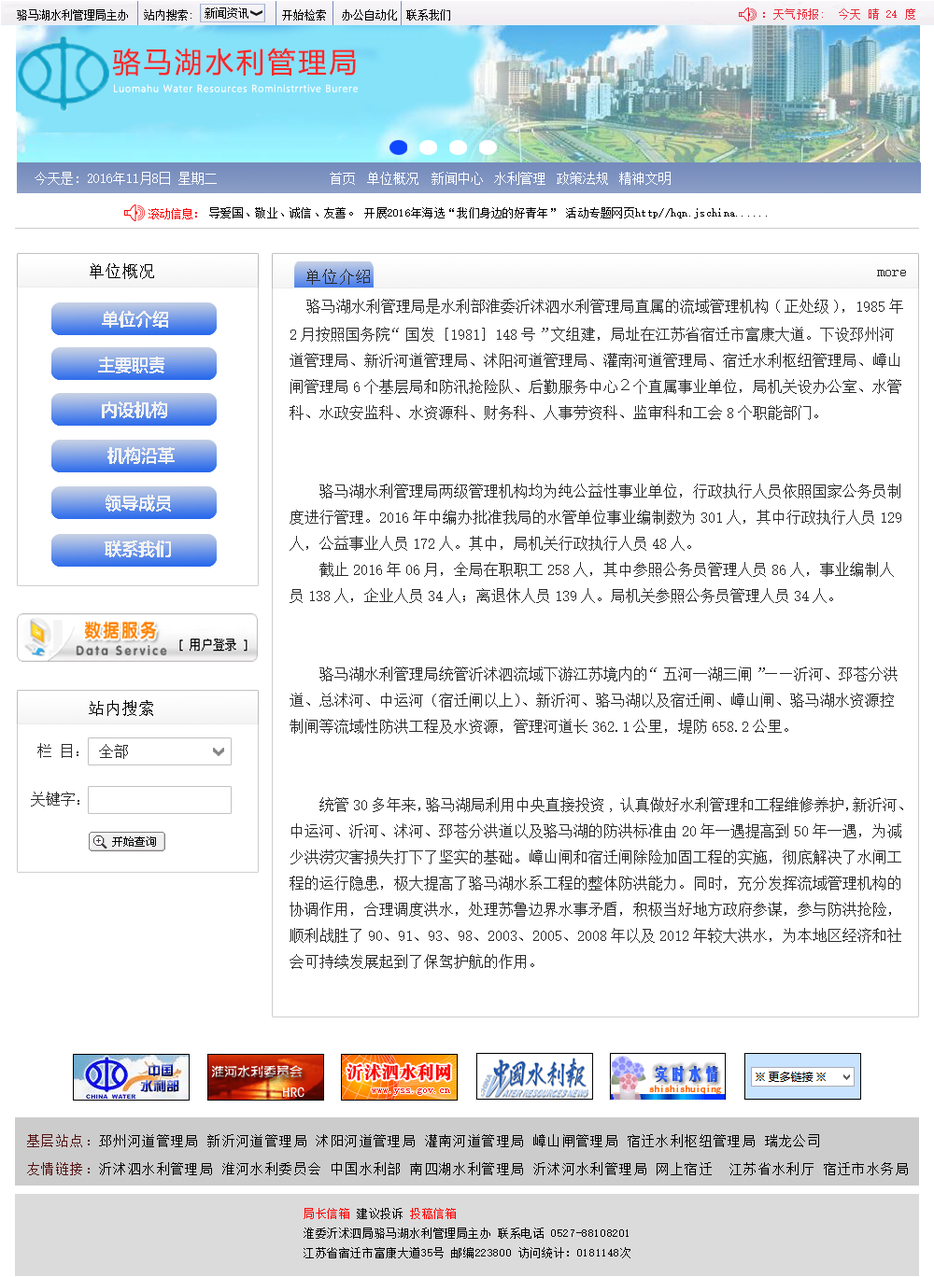
<style>
.page{position:relative;width:934px;height:1277px;background:#ffffff}
.page>*{position:absolute;margin:0}
.t1{font:11.2px "SimSun";color:#000000}
.t2{font:11.2px "SimSun";color:#010101}
.t3{font:11.2px "SimSun";letter-spacing:0.05em;color:#e92b3a}
.t4{font:28px "MicrosoftYaHei";letter-spacing:0.1em;color:#f12020}
.t5{font:9.3px "MicrosoftYaHeiLight";letter-spacing:0.07em;color:#ffffff;font-weight:bold}
.t6{font:13.1px "SimSun";color:#ffffff}
.t7{font:11.2px "SimSun";color:#ff0000}
.t8{font:11.2px "SimSun";letter-spacing:0.025em;color:#010101}
.t9{font:16.8px "SimSun";color:#000000}
.t10{font:16.8px "SimSun";color:#2b2a2a}
.t11{font:14.9px "SimSun";color:#2b2a2a}
.t12{font:16.8px "MicrosoftYaHei-Bold";color:#f2f2f2}
.t13{font:13.1px/28px "SimSun";letter-spacing:0.1em;color:#000000}
.t14{font:13.1px/28px "SimSun";letter-spacing:0.1em;color:#531111}
.t15{font:11.2px "SimSun";letter-spacing:0.05em;color:#000000}
.t16{font:11.2px "SimSun";letter-spacing:0.05em;color:#ff0000}
.t17{font:11.2px/28px "SimSun";letter-spacing:-0.1em;color:#000000}
</style>
<div class="page">
<p class="t1" style="left:17px;top:9px;width:111px;height:12px">骆马湖水利管理局主办</p>
<p class="t1" style="left:144px;top:9px;width:47px;height:12px">站内搜索:</p>
<p class="t1" style="left:204px;top:7px;width:44px;height:12px">新闻资讯</p>
<p class="t2" style="left:282px;top:9px;width:44px;height:12px">开始检索</p>
<p class="t1" style="left:342px;top:9px;width:55px;height:12px">办公自动化</p>
<p class="t1" style="left:406px;top:9px;width:44px;height:12px">联系我们</p>
<p class="t3" style="left:763px;top:8px;width:152px;height:12px">：天气预报:  今天 晴 24 度</p>
<p class="t4" style="left:112px;top:48px;width:244px;height:29px">骆马湖水利管理局</p>
<p class="t5" style="left:114px;top:84px;width:244px;height:8px">Luomahu Water Resources Roministrrtive Burere</p>
<p class="t6" style="left:35px;top:172px;width:182px;height:13px">今天是: 2016年11月8日 星期二</p>
<p class="t6" style="left:330px;top:172px;width:25px;height:13px">首页</p>
<p class="t6" style="left:367px;top:172px;width:51px;height:13px">单位概况</p>
<p class="t6" style="left:431px;top:172px;width:52px;height:13px">新闻中心</p>
<p class="t6" style="left:494px;top:172px;width:51px;height:13px">水利管理</p>
<p class="t6" style="left:556px;top:172px;width:52px;height:13px">政策法规</p>
<p class="t6" style="left:619px;top:172px;width:51px;height:13px">精神文明</p>
<p class="t7" style="left:148px;top:208px;width:49px;height:11px">滚动信息：</p>
<p class="t8" style="left:209px;top:207px;width:558px;height:11px">导爱国、敬业、诚信、友善。 开展2016年海选“我们身边的好青年” 活动专题网页http//hqn.jschina......</p>
<p class="t9" style="left:90px;top:263px;width:64px;height:16px">单位概况</p>
<p class="t10" style="left:306px;top:269px;width:64px;height:16px">单位介绍</p>
<p class="t11" style="left:877px;top:270px;width:29px;height:6px">more</p>
<p class="t11" style="left:289px;top:299px;width:614px;height:670px"><span class="t10">　</span>骆马湖水利管理局是水利部淮委沂沭泗水利管理局直属的流域管理机构(正处级)，1985年2月按照国务院“国发［1981］148号”文组建，局址在江苏省宿迁市富康大道。下设邳州河道管理局、新沂河道管理局、沭阳河道管理局、灌南河道管理局、宿迁水利枢纽管理局、嶂山闸管理局6个基层局和防汛抢险队、后勤服务中心２个直属事业单位，局机关设办公室、水管科、水政安监科、水资源科、财务科、人事劳资科、监审科和工会8个职能部门。<br><br><br>　　骆马湖水利管理局两级管理机构均为纯公益性事业单位，行政执行人员依照国家公务员制度进行管理。2016年中编办批准我局的水管单位事业编制数为301人，其中行政执行人员129人，公益事业人员172人。其中，局机关行政执行人员48人。 <br>　　截止2016年06月，全局在职职工258人，其中参照公务员管理人员86人，事业编制人员138人，企业人员34人；离退休人员139人。局机关参照公务员管理人员34人。<br>  <br><br>　　骆马湖水利管理局统管沂沭泗流域下游江苏境内的“五河一湖三闸”——沂河、邳苍分洪道、总沭河、中运河（宿迁闸以上）、新沂河、骆马湖以及宿迁闸、嶂山闸、骆马湖水资源控制闸等流域性防洪工程及水资源，管理河道长362.1公里，堤防658.2公里。<br><br><br>    统管30多年来，骆马湖局利用中央直接投资,认真做好水利管理和工程维修养护，新沂河、中运河、沂河、沭河、邳苍分洪道以及骆马湖的防洪标准由20年一遇提高到50年一遇，为减少洪涝灾害损失打下了坚实的基础。嶂山闸和宿迁闸除险加固工程的实施，彻底解决了水闸工程的运行隐患，极大提高了骆马湖水系工程的整体防洪能力。同时，充分发挥流域管理机构的协调作用，合理调度洪水，处理苏鲁边界水事矛盾，积极当好地方政府参谋，参与防洪抢险，顺利战胜了90、91、93、98、2003、2005、2008年以及2012年较大洪水，为本地区经济和社会可持续发展起到了保驾护航的作用。</p>
<p class="t12" style="left:102px;top:311px;width:66px;height:17px">单位介绍</p>
<p class="t12" style="left:98px;top:357px;width:66px;height:16px">主要职责</p>
<p class="t12" style="left:102px;top:401px;width:65px;height:17px">内设机构</p>
<p class="t12" style="left:107px;top:447px;width:68px;height:17px">机构沿革</p>
<p class="t12" style="left:105px;top:495px;width:66px;height:17px">领导成员</p>
<p class="t12" style="left:105px;top:541px;width:66px;height:16px">联系我们</p>
<p class="t9" style="left:89px;top:700px;width:64px;height:16px">站内搜索</p>
<p class="t11" style="left:37px;top:743px;width:41px;height:15px">栏 目：</p>
<p class="t11" style="left:99px;top:744px;width:29px;height:15px">全部</p>
<p class="t11" style="left:31px;top:792px;width:48px;height:15px">关键字：</p>
<p class="t13" style="left:27px;top:1134px;width:880px;height:41px"><span class="t14">基层站点：</span>邳州河道管理局 新沂河道管理局 沭阳河道管理局 灌南河道管理局 嶂山闸管理局 宿迁水利枢纽管理局 瑞龙公司<br><span class="t14">友情链接：</span>沂沭泗水利管理局 淮河水利委员会 中国水利部 南四湖水利管理局 沂沭河水利管理局 网上宿迁  江苏省水利厅 宿迁市水务局</p>
<p class="t15" style="left:303px;top:1208px;width:327px;height:51px"><span class="t16">局长信箱</span> 建议投诉 <span class="t16">投稿信箱<br></span>淮委沂沭泗局骆马湖水利管理局主办 联系电话 0527-88108201<br>江苏省宿迁市富康大道35号 邮编223800 访问统计：0181148<span class="t17">次</span></p>
</div>
